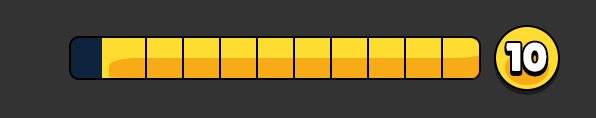
<style>
.page{position:relative;width:596px;height:118px;background:#333333}
.page>*{position:absolute;margin:0}
.t1{font:40px "LilitaOne";color:#ffffff;text-transform:uppercase}
</style>
<div class="page">
<p class="t1" style="left:506px;top:42px;width:41px;height:30px">10</p>
</div>
